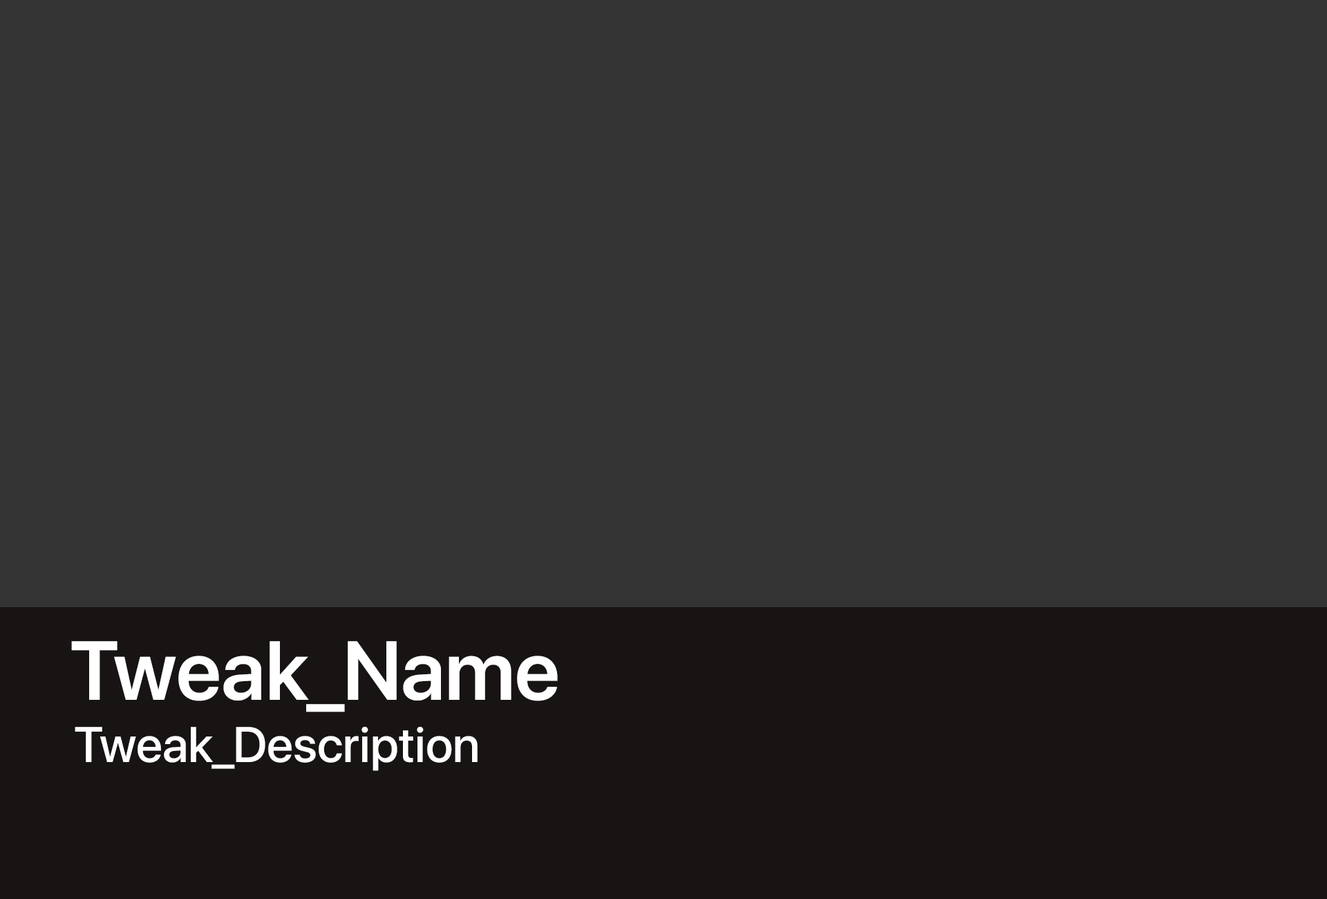
<style>
.page{position:relative;width:1327px;height:899px;background:#333333}
.page>*{position:absolute;margin:0}
.t1{font:82.9px "SFProDisplay-Semibold";color:#ffffff}
.t2{font:49.8px "SFProDisplay-Medium";color:#ffffff}
</style>
<div class="page">
<p class="t1" style="left:71px;top:641px;width:487px;height:71px">Tweak_Name</p>
<p class="t2" style="left:75px;top:726px;width:403px;height:45px">Tweak_Description</p>
</div>
